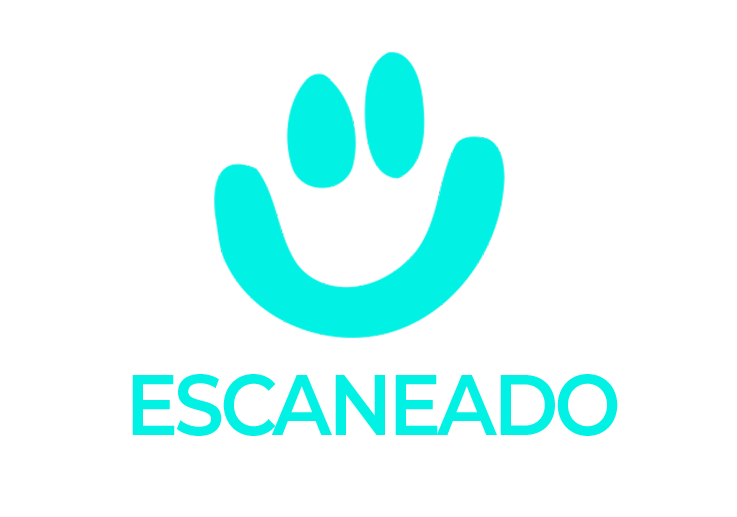
<style>
.page{position:relative;width:737px;height:517px;background:#ffffff}
.page>*{position:absolute;margin:0}
.t1{font:85.7px "Montserrat-SemiBold";letter-spacing:-0.05em;color:#01f1e4;text-transform:uppercase;scale:0.92 1}
</style>
<div class="page">
<p class="t1" style="left:132px;top:374px;width:486px;height:62px">Escaneado</p>
</div>
